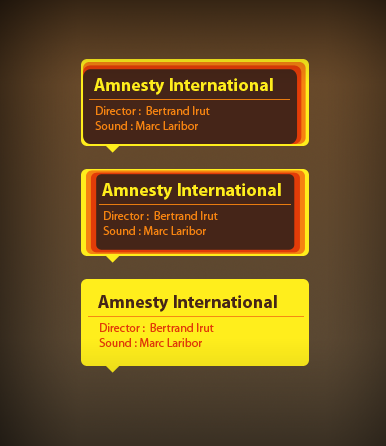
<style>
.page{position:relative;width:386px;height:446px}
.page>*{position:absolute;margin:0}
.t1{font:18px "MyriadPro-Bold";color:#ffee1c}
.t2{font:12px "MyriadPro-Regular";color:#f58311}
.t3{font:18px "MyriadPro-Bold";color:#452518}
.t4{font:12px "MyriadPro-Regular";color:#e23c08}
</style>
<div class="page">
<p class="t1" style="left:94px;top:78px;width:179px;height:17px">Amnesty International</p>
<p class="t2" style="left:95px;top:106px;width:115px;height:24px">Director :  Bertrand Irut<br>Sound : Marc Laribor</p>
<p class="t1" style="left:102px;top:183px;width:179px;height:17px">Amnesty International</p>
<p class="t2" style="left:103px;top:211px;width:115px;height:24px">Director :  Bertrand Irut<br>Sound : Marc Laribor</p>
<p class="t3" style="left:98px;top:295px;width:179px;height:17px">Amnesty International</p>
<p class="t4" style="left:99px;top:323px;width:115px;height:24px">Director :  Bertrand Irut<br>Sound : Marc Laribor</p>
</div>
